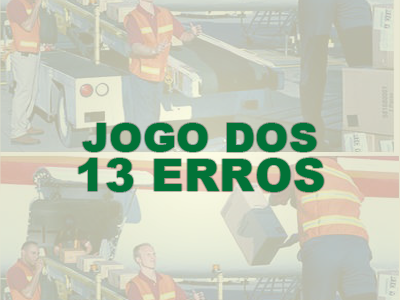
<style>
.page{position:relative;width:400px;height:300px}
.page>*{position:absolute;margin:0}
.t1{font:40px "Arial-Black";letter-spacing:0.01em;color:#017338}
.t2{font:45px "Arial-Black";letter-spacing:0.01em;color:#017338}
</style>
<div class="page">
<p class="t1" style="left:78px;top:123px;width:246px;height:69px;text-align:center">JOGO DOS<br><span class="t2">13 ERROS</span></p>
</div>
